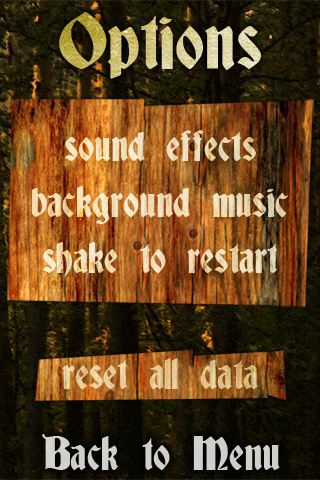
<style>
.page{position:relative;width:320px;height:480px}
.page>*{position:absolute;margin:0}
.t1{font:73px "Deutsch-Gothic"}
.t2{font:40px/56px "Deutsch-Gothic"}
.t3{font:40px "Deutsch-Gothic";color:#e4c694}
.t4{font:43px "Deutsch-Gothic";color:#cfcfcc}
</style>
<div class="page">
<p class="t1" style="left:59px;top:12px;width:203px;height:67px">Options</p>
<p class="t2" style="left:31px;top:130px;width:257px;height:146px;text-align:center">sound effects <br> background music <br> shake to restart</p>
<p class="t2" style="left:31px;top:130px;width:257px;height:146px;text-align:center">sound effects <br> background music <br> shake to restart</p>
<p class="t2" style="left:31px;top:130px;width:257px;height:146px;text-align:center">sound effects <br> background music <br> shake to restart</p>
<p class="t3" style="left:62px;top:358px;width:196px;height:31px">reset all data</p>
<p class="t3" style="left:62px;top:358px;width:196px;height:31px">reset all data</p>
<p class="t4" style="left:42px;top:434px;width:238px;height:36px">Back to Menu</p>
</div>
